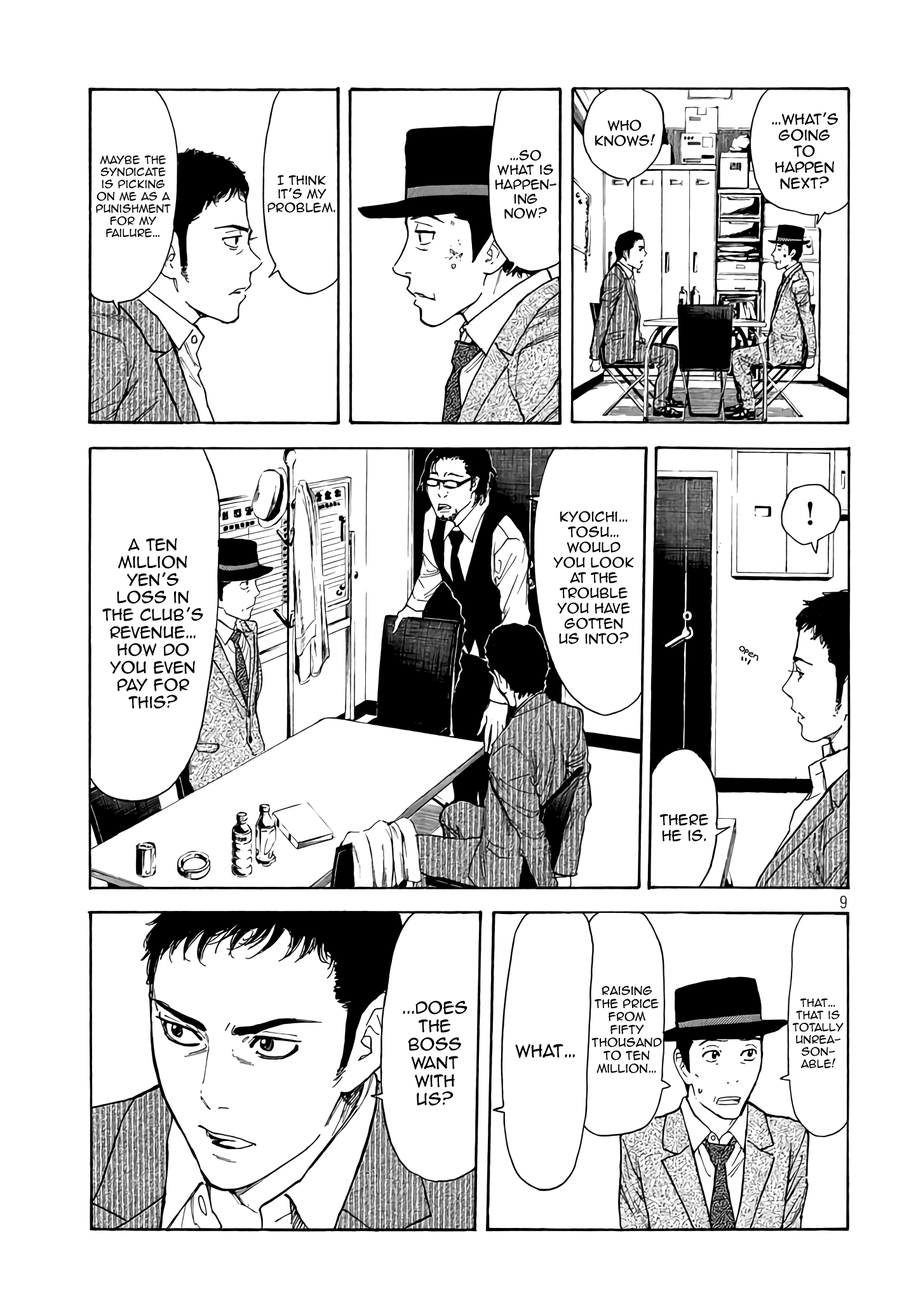
<style>
.page{position:relative;width:916px;height:1301px;background:#ffffff}
.page>*{position:absolute;margin:0}
.t1{font:13.3px "AnimeAce2.0BB";color:#000000}
.t2{font:12.7px "AnimeAce2.0BB";color:#000000}
.t3{font:12.1px "AnimeAce2.0BB";color:#000000}
.t4{font:10.2px "AnimeAce2.0BB";color:#000000}
.t5{font:11.4px "AnimeAce2.0BB";color:#000000}
.t6{font:14.6px "AnimeAce2.0BB";color:#000000}
.t7{font:8.9px "Augie";color:#000000;font-weight:bold}
.t8{font:10.8px "AnimeAce2.0BB";color:#000000}
.t9{font:15.3px "AnimeAce2.0BB";color:#000000}
.t10{font:15.9px "AnimeAce2.0BB";color:#000000}
</style>
<div class="page">
<p class="t1" style="left:772px;top:112px;width:66px;height:77px;text-align:center">…What’s going to happen next?</p>
<p class="t2" style="left:595px;top:119px;width:61px;height:28px;text-align:center">Who knows!</p>
<p class="t3" style="left:495px;top:150px;width:62px;height:69px;text-align:center">…So what is happen-<br>ing now?</p>
<p class="t4" style="left:96px;top:155px;width:75px;height:83px;text-align:center">Maybe the syndicate <br>is picking on me as a punishment for my failure…</p>
<p class="t5" style="left:268px;top:175px;width:68px;height:38px;text-align:center">I think <br>it’s my problem.</p>
<p class="t2" style="left:553px;top:511px;width:81px;height:134px;text-align:center">Kyoichi… Tosu… would you look at the trouble you have gotten <br>us into?</p>
<p class="t6" style="left:102px;top:538px;width:101px;height:171px;text-align:center">A ten million yen’s loss in the club’s revenue… How do you even pay for this?</p>
<p class="t7" style="left:739px;top:646px;width:20px;height:15px;rotate:31deg">open</p>
<p class="t1" style="left:660px;top:814px;width:49px;height:28px;text-align:center">There he is.</p>
<p class="t8" style="left:592px;top:986px;width:70px;height:88px;text-align:center">Raising the price from fifty thousand to ten million…</p>
<p class="t9" style="left:403px;top:1001px;width:65px;height:105px;text-align:center">...Does <br>the<br>boss want  with <br>us?</p>
<p class="t4" style="left:793px;top:998px;width:51px;height:71px;text-align:center">That… that is totally unrea-<br>son-<br>able!</p>
<p class="t10" style="left:515px;top:1044px;width:60px;height:15px">What…</p>
</div>
